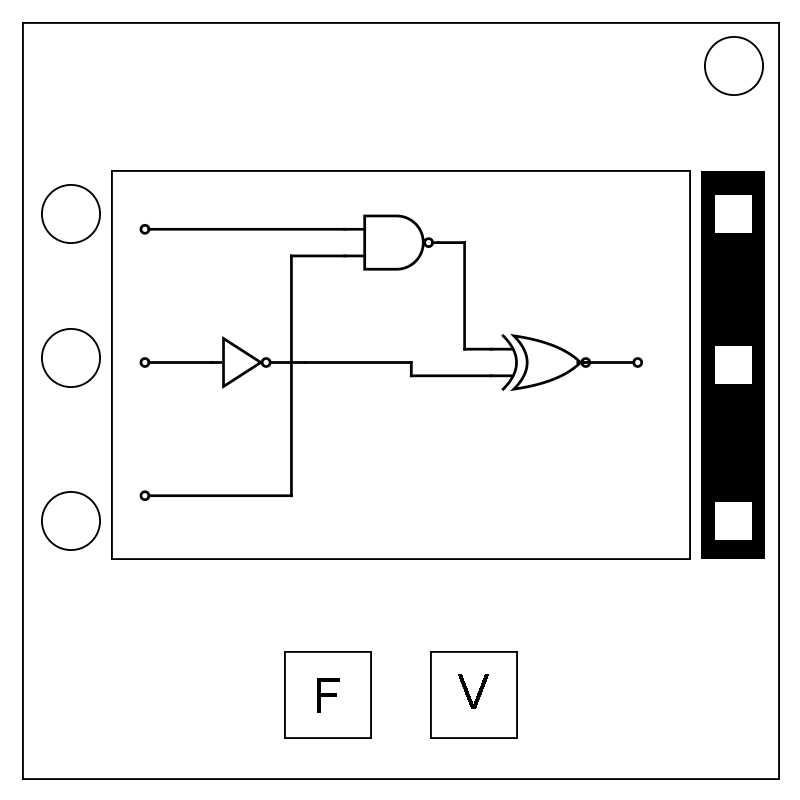
<style>
.page{position:relative;width:800px;height:800px;background:#ffffff}
.page>*{position:absolute;margin:0}
.t1{font:48px "ArialMT";color:#000000}
</style>
<div class="page">
<p class="t1" style="left:317px;top:678px;width:23px;height:35px">F</p>
<p class="t1" style="left:458px;top:674px;width:31px;height:35px">V</p>
</div>
